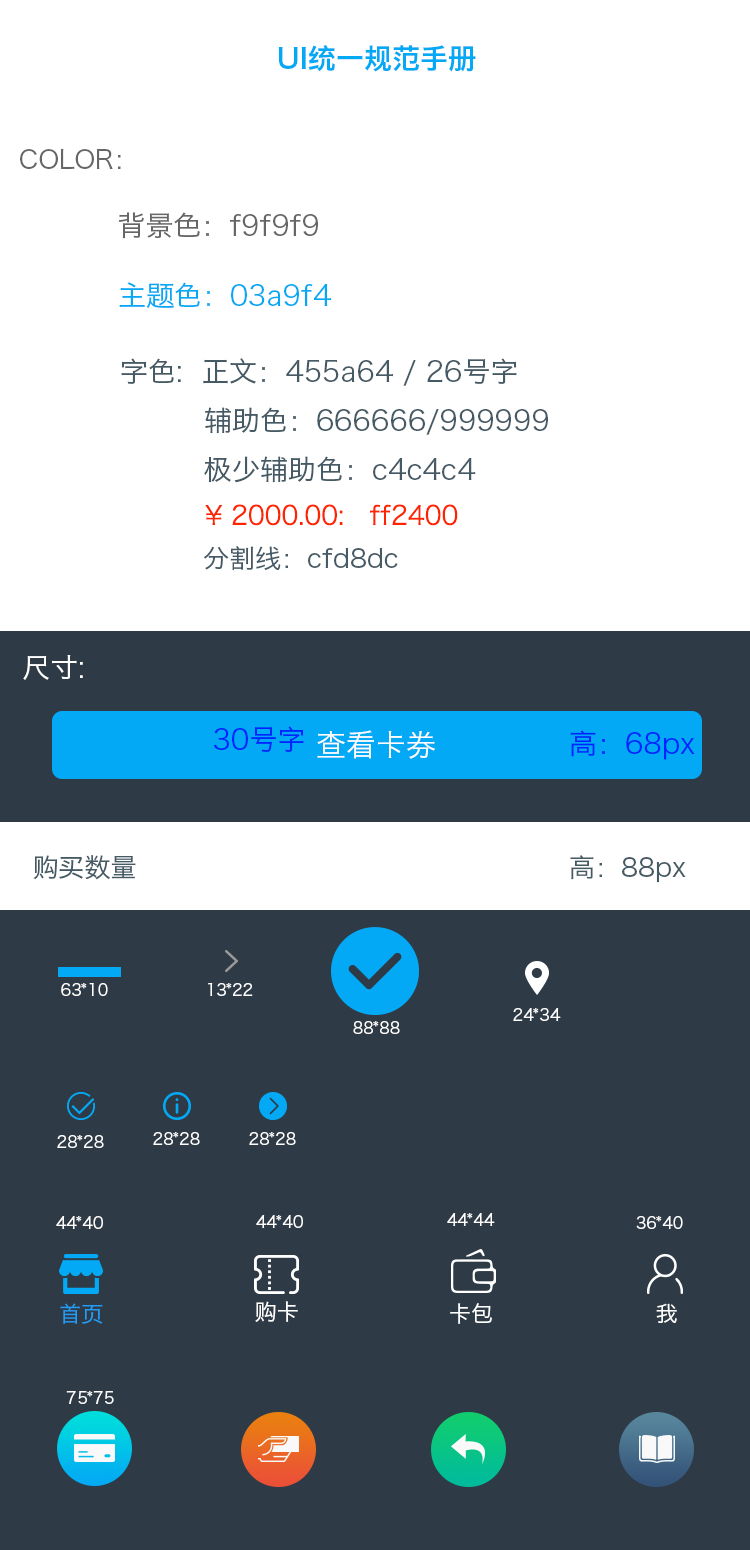
<style>
.page{position:relative;width:750px;height:1550px;background:#2e3a46}
.page>*{position:absolute;margin:0}
.t1{font:28px "HiraginoSansGB-W6";color:#03a9f4}
.t2{font:25.7px "HiraginoSansGB-W3";color:#666666}
.t3{font:28px "HiraginoSansGB-W3";color:#666666}
.t4{font:28px "HiraginoSansGB-W3";color:#03a9f4}
.t5{font:28px "HiraginoSansGB-W3";color:#455a64}
.t6{font:26px "HiraginoSansGB-W3";color:#ff2400}
.t7{font:26px "HiraginoSansGB-W3";color:#455a64}
.t8{font:28px "HiraginoSansGB-W3";color:#ffffff}
.t9{font:28px "HiraginoSansGB-W3";color:#0024ff}
.t10{font:30px "HiraginoSansGB-W3";color:#ffffff}
.t11{font:16px "HiraginoSansGB-W3";color:#ffffff}
.t12{font:22px "HiraginoSansGB-W3";color:#ffffff}
.t13{font:21.9px "HiraginoSansGB-W3";color:#229cf4}
.t14{font:22.1px "HiraginoSansGB-W3";color:#ffffff}
</style>
<div class="page">
<p class="t1" style="left:278px;top:45px;width:198px;height:27px">UI统一规范手册</p>
<p class="t2" style="left:20px;top:149px;width:101px;height:20px">COLOR：</p>
<p class="t3" style="left:119px;top:212px;width:199px;height:27px">背景色：f9f9f9</p>
<p class="t4" style="left:119px;top:282px;width:212px;height:26px">主题色：03a9f4</p>
<p class="t5" style="left:121px;top:358px;width:427px;height:125px">字色:  正文：455a64 / 26号字<br>         辅助色：666666/999999<br>         极少辅助色：c4c4c4</p>
<p class="t6" style="left:205px;top:504px;width:253px;height:22px">¥ 2000.00:   ff2400</p>
<p class="t7" style="left:203px;top:546px;width:195px;height:25px">分割线：cfd8dc</p>
<p class="t8" style="left:23px;top:655px;width:60px;height:25px">尺寸:</p>
<p class="t9" style="left:213px;top:726px;width:91px;height:26px">30号字</p>
<p class="t10" style="left:317px;top:730px;width:118px;height:29px">查看卡券</p>
<p class="t9" style="left:570px;top:730px;width:125px;height:30px">高：68px</p>
<p class="t7" style="left:33px;top:855px;width:103px;height:25px">购买数量</p>
<p class="t7" style="left:570px;top:855px;width:116px;height:28px">高：88px</p>
<p class="t11" style="left:61px;top:983px;width:47px;height:13px">63*10</p>
<p class="t11" style="left:208px;top:983px;width:45px;height:13px">13*22</p>
<p class="t11" style="left:513px;top:1008px;width:48px;height:13px">24*34</p>
<p class="t11" style="left:353px;top:1021px;width:47px;height:13px">88*88</p>
<p class="t11" style="left:153px;top:1132px;width:47px;height:13px">28*28</p>
<p class="t11" style="left:249px;top:1132px;width:47px;height:13px">28*28</p>
<p class="t11" style="left:57px;top:1135px;width:47px;height:13px">28*28</p>
<p class="t11" style="left:56px;top:1216px;width:47px;height:13px">44*40</p>
<p class="t11" style="left:256px;top:1215px;width:47px;height:13px">44*40</p>
<p class="t11" style="left:447px;top:1213px;width:48px;height:13px">44*44</p>
<p class="t11" style="left:636px;top:1216px;width:47px;height:13px">36*40</p>
<p class="t12" style="left:255px;top:1301px;width:43px;height:21px">购卡</p>
<p class="t13" style="left:60px;top:1303px;width:43px;height:21px">首页</p>
<p class="t12" style="left:450px;top:1303px;width:42px;height:21px">卡包</p>
<p class="t14" style="left:656px;top:1303px;width:21px;height:20px">我</p>
<p class="t11" style="left:66px;top:1391px;width:48px;height:13px">75*75</p>
</div>
